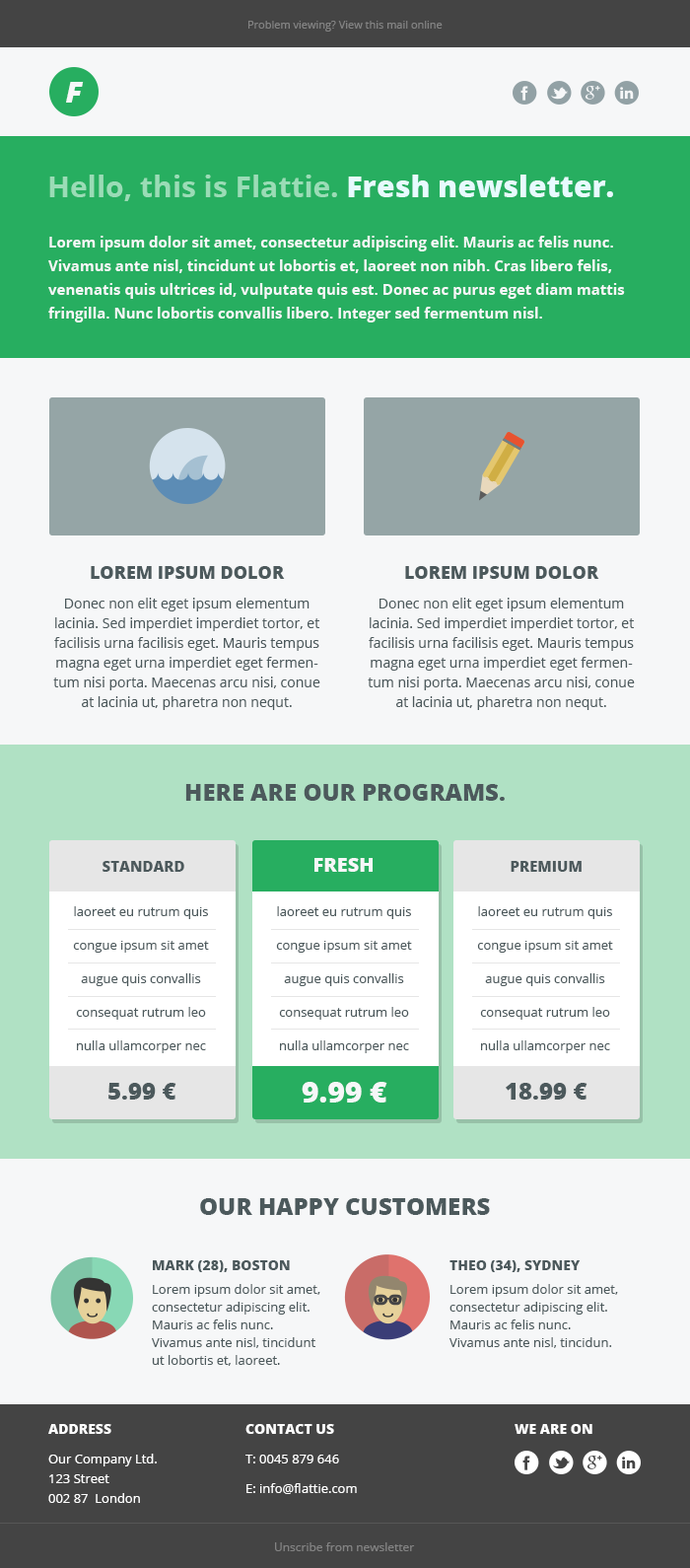
<style>
.page{position:relative;width:690px;height:1568px;background:#f6f7f8}
.page>*{position:absolute;margin:0}
.t1{font:10.8px "OpenSans";color:#838383}
.t2{font:29.6px "OpenSans-ExtraboldItalic";color:#f6f7f8}
.t3{font:29.6px "OpenSans-Bold";color:#9adcb6}
.t4{font:29.6px "OpenSans-Extrabold";color:#e7faff}
.t5{font:14.8px/23.7px "OpenSans-Bold";color:#f6f7f8}
.t6{font:13.8px/19.7px "OpenSans";color:#4c595c}
.t7{font:17.8px/23.7px "OpenSans-Extrabold";color:#4c595c;text-transform:uppercase}
.t8{font:13.8px/29.6px "OpenSans";color:#4c595c}
.t9{font:23.7px "OpenSans-Extrabold";color:#4c595c;text-transform:uppercase}
.t10{font:19.7px "OpenSans-Extrabold";color:#f6f7f8;text-transform:uppercase}
.t11{font:14.8px "OpenSans-Extrabold";color:#4c595c;text-transform:uppercase}
.t12{font:12.8px/33.5px "OpenSans";color:#4c595c}
.t13{font:23.7px "OpenSans-Extrabold";color:#4c595c}
.t14{font:29.6px "OpenSans-Extrabold";color:#f6f7f8}
.t15{font:12.8px/17.8px "OpenSans";color:#4c595c}
.t16{font:13.8px/17.8px "OpenSans-Extrabold";color:#4c595c;text-transform:uppercase}
.t17{font:12.8px/23.7px "OpenSans";color:#4c595c}
.t18{font:12.8px/19.7px "OpenSans";color:#ffffff}
.t19{font:13.8px/29.6px "OpenSans-Extrabold";color:#ffffff;text-transform:uppercase}
.t20{font:12.8px/29.6px "OpenSans";color:#ffffff}
.t21{font:13.8px "OpenSans-Extrabold";color:#ffffff;text-transform:uppercase}
.t22{font:11.8px "OpenSans";color:#838383}
</style>
<div class="page">
<p class="t1" style="left:249px;top:21px;width:194px;height:11px">Problem viewing? View this mail online</p>
<p class="t2" style="left:66px;top:82px;width:18px;height:21px">F</p>
<p class="t3" style="left:49px;top:175px;width:564px;height:26px">Hello, this is Flattie. <span class="t4">Fresh newsletter.</span></p>
<p class="t5" style="left:48px;top:236px;width:577px;height:86px">Lorem ipsum dolor sit amet, consectetur adipiscing elit. Mauris ac felis nunc. Vivamus ante nisl, tincidunt ut lobortis et, laoreet non nibh. Cras libero felis, venenatis quis ultrices id, vulputate quis est. Donec ac purus eget diam mattis fringilla. Nunc lobortis convallis libero. Integer sed fermentum nisl.</p>
<p class="t6" style="left:53px;top:566px;width:268px;height:144px;text-align:center"><span class="t7">Lorem ipsum dolor<br></span><span class="t8">Donec non elit eget ipsum elementum </span>lacinia. Sed imperdiet imperdiet tortor, et facilisis urna facilisis eget. Mauris tempus magna eget urna imperdiet eget fermentum nisi porta. Maecenas arcu nisi, conue at lacinia ut, pharetra non nequt.</p>
<p class="t6" style="left:368px;top:566px;width:267px;height:144px;text-align:center"><span class="t7">Lorem ipsum dolor<br></span><span class="t8">Donec non elit eget ipsum elementum </span>lacinia. Sed imperdiet imperdiet tortor, et facilisis urna facilisis eget. Mauris tempus magna eget urna imperdiet eget fermentum nisi porta. Maecenas arcu nisi, conue at lacinia ut, pharetra non nequt.</p>
<p class="t9" style="left:185px;top:784px;width:320px;height:17px">Here are our programs.</p>
<p class="t10" style="left:315px;top:858px;width:58px;height:14px">Fresh</p>
<p class="t11" style="left:103px;top:861px;width:81px;height:11px">Standard</p>
<p class="t11" style="left:511px;top:861px;width:71px;height:11px">Premium</p>
<p class="t12" style="left:73px;top:906px;width:136px;height:147px;text-align:center">laoreet eu rutrum quis<br>congue ipsum sit amet<br>augue quis convallis<br>consequat rutrum leo<br>nulla ullamcorper nec</p>
<p class="t12" style="left:276px;top:906px;width:136px;height:147px;text-align:center">laoreet eu rutrum quis<br>congue ipsum sit amet<br>augue quis convallis<br>consequat rutrum leo<br>nulla ullamcorper nec</p>
<p class="t12" style="left:477px;top:906px;width:136px;height:147px;text-align:center">laoreet eu rutrum quis<br>congue ipsum sit amet<br>augue quis convallis<br>consequat rutrum leo<br>nulla ullamcorper nec</p>
<p class="t13" style="left:108px;top:1083px;width:69px;height:17px">5.99 €</p>
<p class="t14" style="left:302px;top:1082px;width:86px;height:21px">9.99 €</p>
<p class="t13" style="left:506px;top:1083px;width:82px;height:17px">18.99 €</p>
<p class="t9" style="left:200px;top:1198px;width:290px;height:17px">Our happy customers</p>
<p class="t15" style="left:152px;top:1260px;width:169px;height:106px"><span class="t16">Mark (28), Boston<br></span><span class="t17">Lorem ipsum dolor sit amet, </span>consectetur adipiscing elit. Mauris ac felis nunc. Vivamus ante nisl, tincidunt ut lobortis et, laoreet.</p>
<p class="t15" style="left:450px;top:1260px;width:168px;height:88px"><span class="t16">Theo (34), sydney<br></span><span class="t17">Lorem ipsum dolor sit amet, </span>consectetur adipiscing elit. Mauris ac felis nunc. Vivamus ante nisl, tincidun.</p>
<p class="t18" style="left:48px;top:1424px;width:109px;height:79px"><span class="t19">Address<br></span><span class="t20">Our Company Ltd.<br></span>123 Street<br>002 87  London</p>
<p class="t20" style="left:246px;top:1424px;width:111px;height:70px"><span class="t19">Contact us<br></span>T: 0045 879 646<br>E: info@flattie.com</p>
<p class="t21" style="left:515px;top:1424px;width:78px;height:10px">We are on</p>
<p class="t22" style="left:275px;top:1542px;width:140px;height:9px">Unscribe from newsletter</p>
</div>
